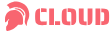
<style>
.page{position:relative;width:112px;height:31px;background:#ffffff}
.page>*{position:absolute;margin:0}
.t1{font:24px "SairaStencilOne-Regular";color:#f86570;text-transform:uppercase}
</style>
<div class="page">
<p class="t1" style="left:35px;top:8px;width:75px;height:18px">CLOUD</p>
</div>
